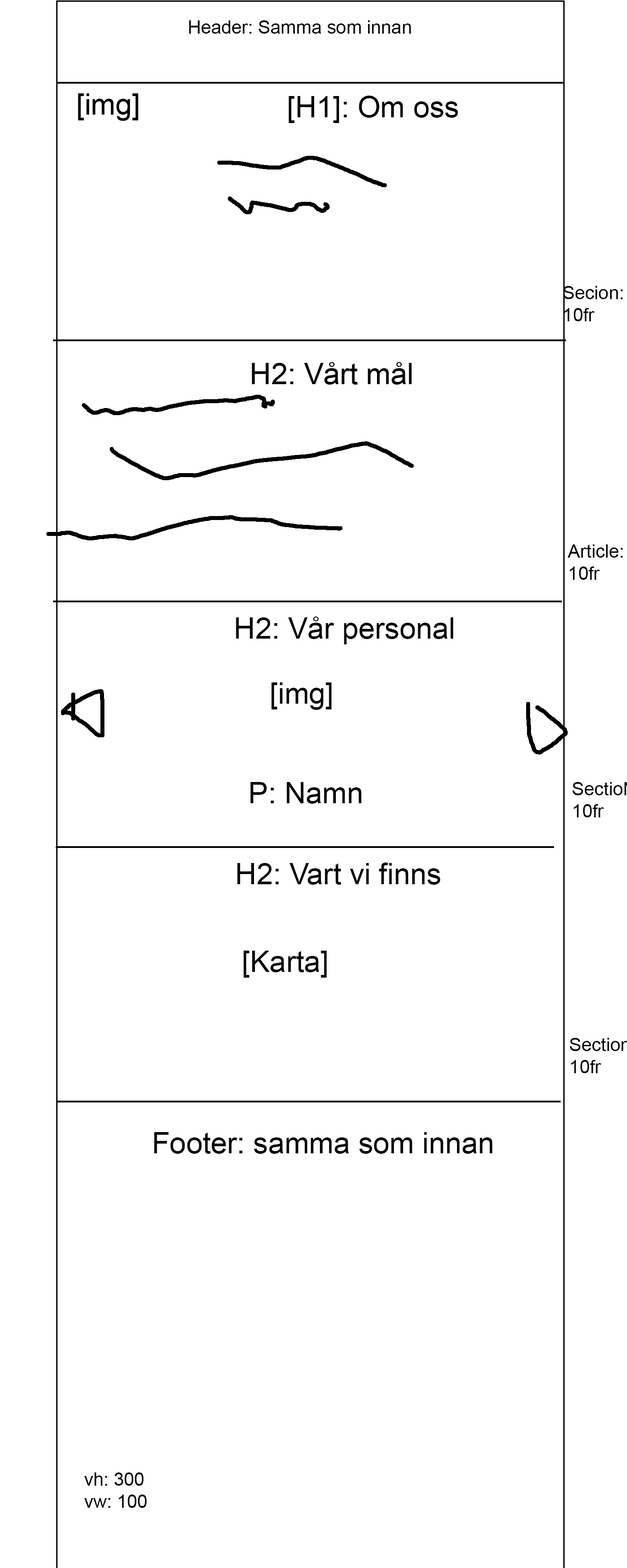
<style>
.page{position:relative;width:627px;height:1568px;background:#ffffff}
.page>*{position:absolute;margin:0}
.t1{font:18.4px "ArialMT";color:#000000}
.t2{font:29.5px "ArialMT";color:#000000}
</style>
<div class="page">
<p class="t1" style="left:189px;top:20px;width:222px;height:14px">Header: Samma som innan</p>
<p class="t2" style="left:289px;top:96px;width:169px;height:27px">[H1]: Om oss</p>
<p class="t1" style="left:563px;top:286px;width:60px;height:35px">Secion:<br>10fr</p>
<p class="t1" style="left:567px;top:544px;width:56px;height:36px">Article:<br>10fr</p>
<p class="t2" style="left:236px;top:616px;width:218px;height:28px">H2: Vår personal</p>
<p class="t2" style="left:271px;top:682px;width:61px;height:28px">[img]</p>
<p class="t2" style="left:250px;top:782px;width:112px;height:22px">P: Namn</p>
<p class="t2" style="left:237px;top:863px;width:203px;height:22px">H2: Vart vi finns</p>
<p class="t2" style="left:243px;top:951px;width:84px;height:27px">[Karta]</p>
<p class="t2" style="left:154px;top:1132px;width:339px;height:22px">Footer: samma som innan</p>
<p class="t1" style="left:84px;top:1472px;width:63px;height:36px">vh: 300<br>vw: 100</p>
</div>
